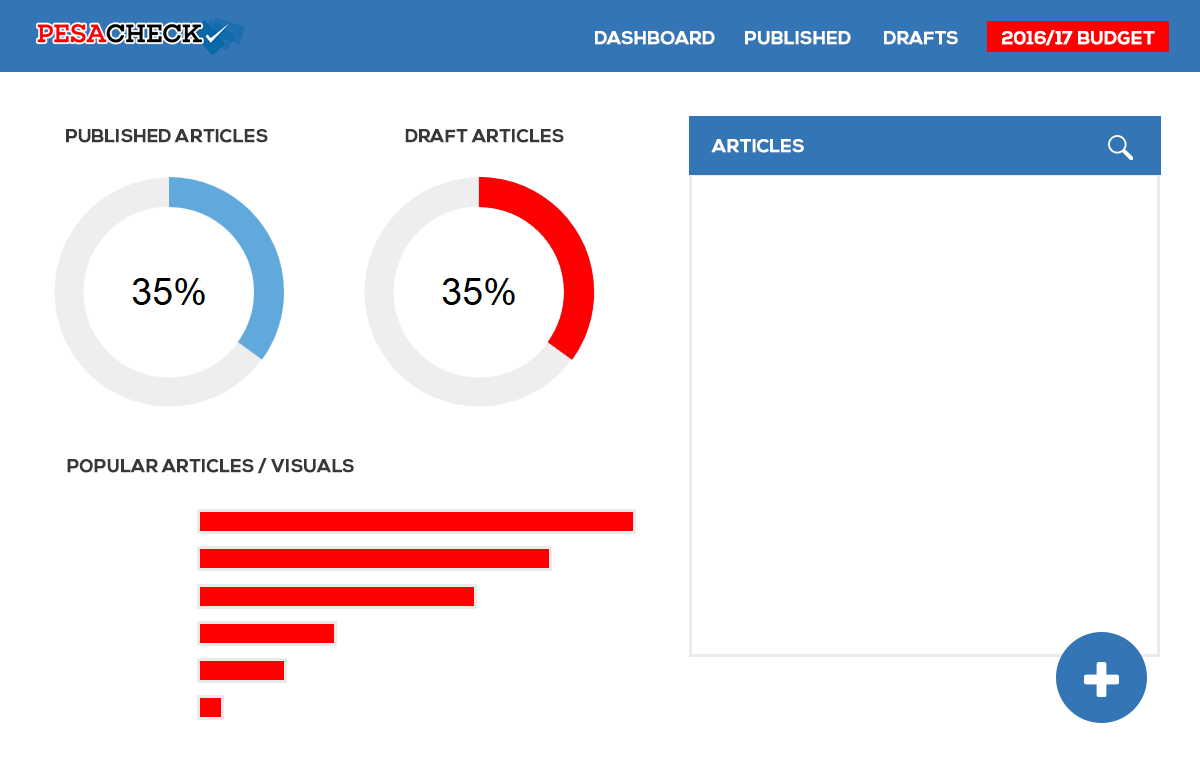
<style>
.page{position:relative;width:1200px;height:768px;background:#ffffff}
.page>*{position:absolute;margin:0}
.t1{font:18px "NexaBold";color:#fefefe;text-transform:uppercase;font-weight:bold}
.t2{font:18px "NexaBold";color:#383838;text-transform:uppercase;font-weight:bold}
</style>
<div class="page">
<p class="t1" style="left:1002px;top:30px;width:153px;height:16px">2016/17 budget</p>
<p class="t1" style="left:595px;top:31px;width:120px;height:14px">dashboard</p>
<p class="t1" style="left:745px;top:31px;width:106px;height:14px">Published</p>
<p class="t1" style="left:884px;top:31px;width:74px;height:14px">Drafts</p>
<p class="t2" style="left:66px;top:129px;width:202px;height:14px">published articles</p>
<p class="t2" style="left:405px;top:129px;width:159px;height:14px">draft articles</p>
<p class="t1" style="left:711px;top:139px;width:93px;height:14px">ARTICLES</p>
<p class="t2" style="left:67px;top:458px;width:287px;height:16px">popular Articles / visuals</p>
</div>
